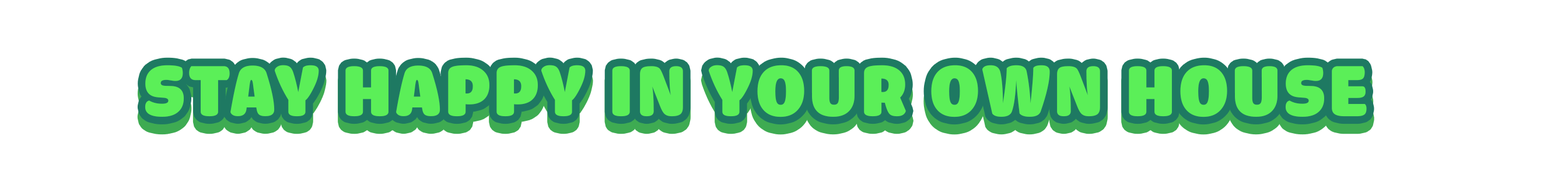
<style>
.page{position:relative;width:1568px;height:181px;background:#ffffff}
.page>*{position:absolute;margin:0}
.t1{font:75.8px "iCielCadena";letter-spacing:0.05em;color:#5bef58;text-transform:uppercase}
</style>
<div class="page">
<p class="t1" style="left:145px;top:65px;width:1222px;height:52px">Stay happy in your own house</p>
</div>
